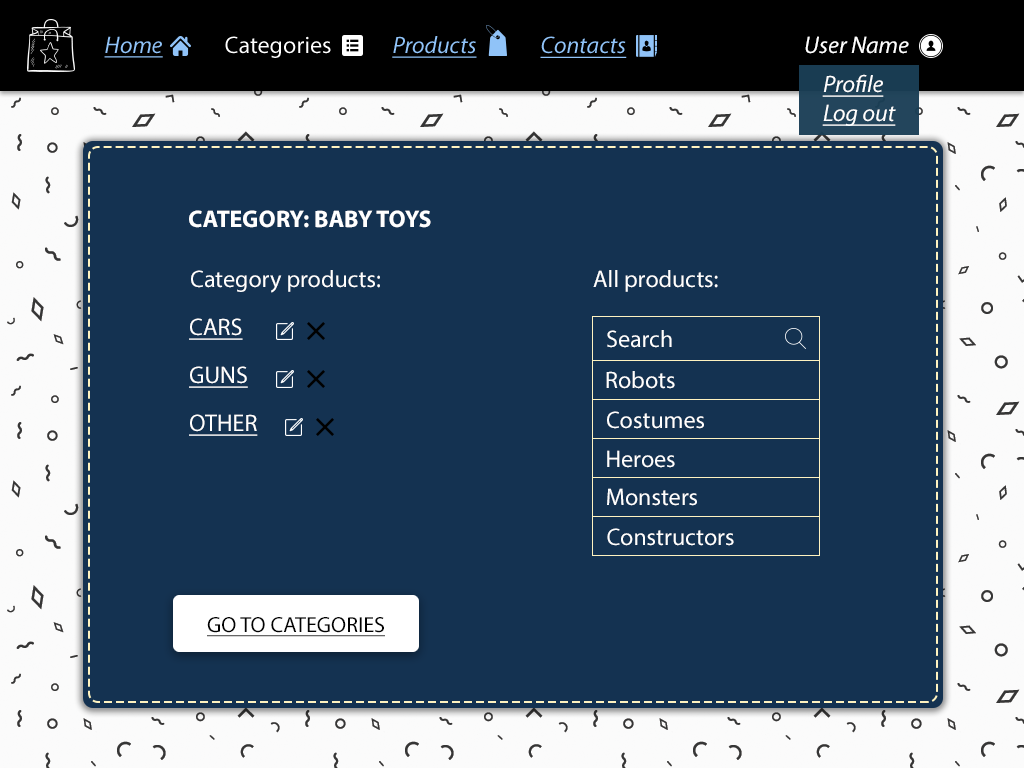
<style>
.page{position:relative;width:1024px;height:768px;background:#143251}
.page>*{position:absolute;margin:0}
.t1{font:24px "MyriadPro-It";color:#90c3f8;text-decoration:underline}
.t2{font:24px "MyriadPro-Regular";color:#ffffff}
.t3{font:24px "MyriadPro-It";color:#ffffff}
.t4{font:24px "MyriadPro-It";color:#ffffff;text-decoration:underline}
.t5{font:24px "MyriadPro-Bold";color:#ffffff;text-transform:uppercase}
.t6{font:24px "MyriadPro-Regular";color:#ffffff;text-transform:uppercase}
.t7{font:24px "MyriadPro-Regular";color:#ffffff;text-transform:uppercase;text-decoration:underline}
.t8{font:24px "MyriadPro-Regular";color:#ffffff;text-decoration:underline}
.t9{font:22px "MyriadPro-Regular";color:#020202;text-transform:uppercase;text-decoration:underline}
</style>
<div class="page">
<p class="t1" style="left:104px;top:36px;width:59px;height:22px">Home</p>
<p class="t2" style="left:225px;top:36px;width:106px;height:22px">Categories</p>
<p class="t1" style="left:392px;top:36px;width:85px;height:22px">Products</p>
<p class="t1" style="left:540px;top:36px;width:87px;height:22px">Contacts</p>
<p class="t3" style="left:805px;top:36px;width:104px;height:18px">User Name</p>
<p class="t4" style="left:822px;top:74px;width:62px;height:23px">Profile</p>
<p class="t4" style="left:822px;top:104px;width:74px;height:22px">Log out</p>
<p class="t5" style="left:189px;top:210px;width:242px;height:18px">CategorY: BABY TOYS</p>
<p class="t2" style="left:191px;top:270px;width:189px;height:23px"><span class="t6">C</span>ategory products:</p>
<p class="t2" style="left:593px;top:270px;width:125px;height:22px"><span class="t6">A</span>ll products:</p>
<p class="t7" style="left:189px;top:318px;width:54px;height:22px">Cars</p>
<p class="t2" style="left:607px;top:330px;width:65px;height:18px">Search</p>
<p class="t8" style="left:189px;top:366px;width:59px;height:22px">GUNS</p>
<p class="t2" style="left:606px;top:371px;width:69px;height:18px">Robots</p>
<p class="t8" style="left:189px;top:414px;width:69px;height:22px">OTHER</p>
<p class="t2" style="left:607px;top:411px;width:97px;height:18px">Costumes</p>
<p class="t2" style="left:607px;top:450px;width:68px;height:18px">Heroes</p>
<p class="t2" style="left:607px;top:488px;width:90px;height:18px">Monsters</p>
<p class="t2" style="left:607px;top:528px;width:127px;height:18px">Constructors</p>
<p class="t9" style="left:207px;top:617px;width:178px;height:20px">Go to categories</p>
</div>
